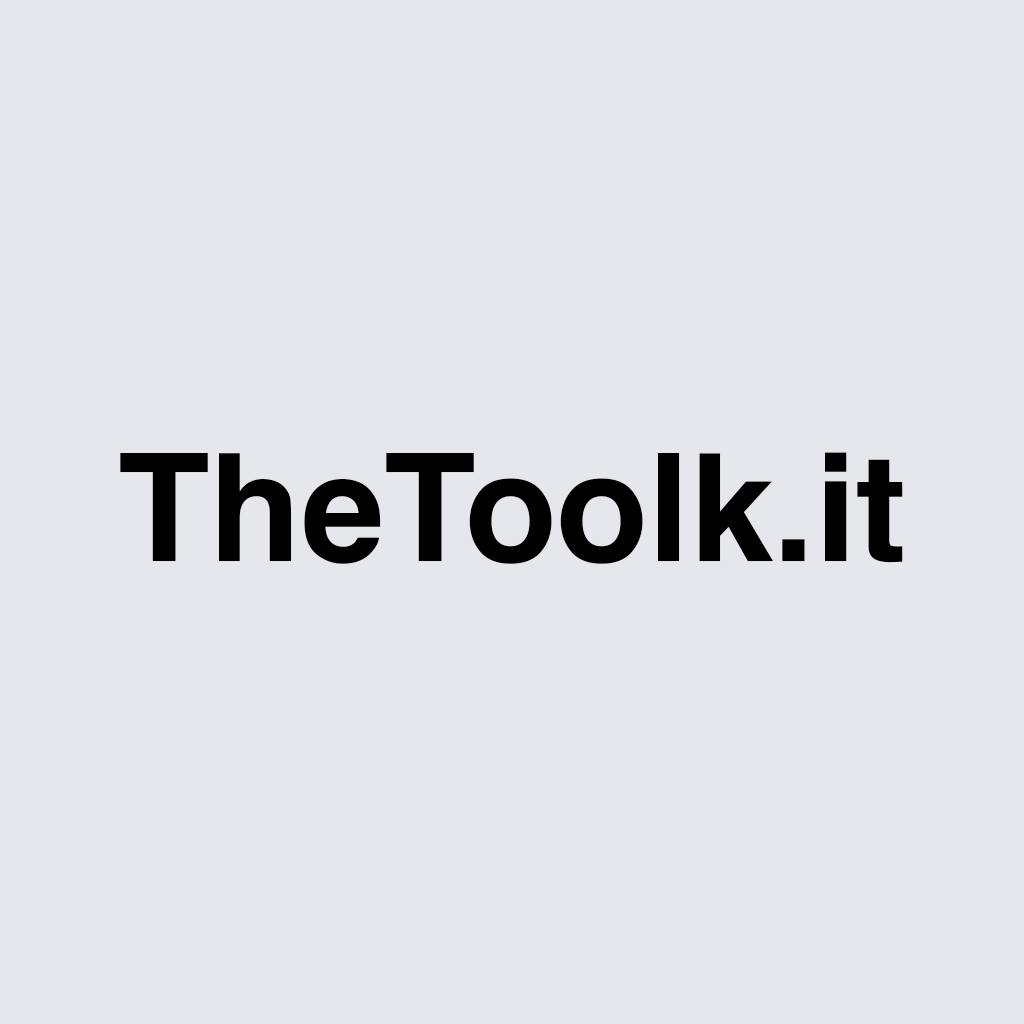
<style>
.page{position:relative;width:1024px;height:1024px;background:#e5e7eb}
.page>*{position:absolute;margin:0}
.t1{font:150px "Helvetica-Bold";color:#000000}
</style>
<div class="page">
<p class="t1" style="left:120px;top:452px;width:783px;height:112px">TheToolk.it</p>
</div>
